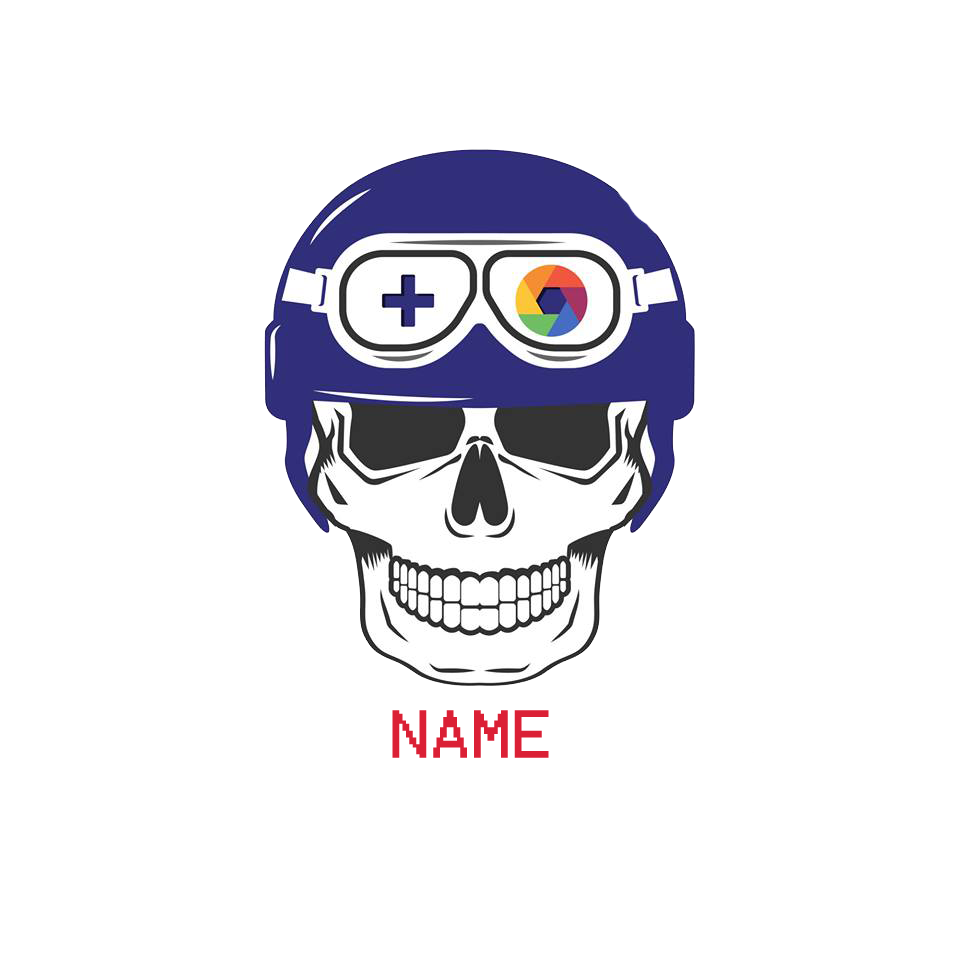
<style>
.page{position:relative;width:960px;height:960px;background:#ffffff}
.page>*{position:absolute;margin:0}
.t1{font:54.2px "Terminal";color:#db2035}
</style>
<div class="page">
<p class="t1" style="left:392px;top:710px;width:157px;height:48px">NAME</p>
</div>
